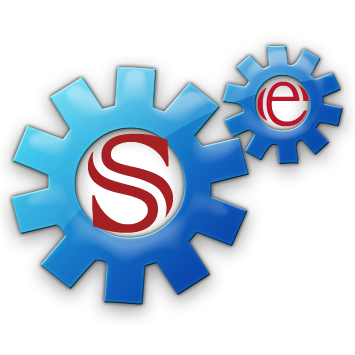
<style>
.page{position:relative;width:355px;height:355px;background:#ffffff}
.page>*{position:absolute;margin:0}
.t1{font:122.2px "ColonnaMT";color:#b9162d}
.t2{font:273px "ColonnaMT";color:#a42023}
</style>
<div class="page">
<p class="t1" style="left:257px;top:81px;width:52px;height:46px">e</p>
<p class="t2" style="left:88px;top:133px;width:85px;height:100px">s</p>
</div>
